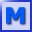
<style>
.page{position:relative;width:32px;height:32px;background:#ced4ff}
.page>*{position:absolute;margin:0}
.t1{font:22px "Verdana-Bold";color:#005aff;scale:1.1 1}
</style>
<div class="page">
<p class="t1" style="left:6px;top:7px;width:19px;height:17px">M</p>
</div>
